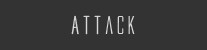
<style>
.page{position:relative;width:207px;height:50px;background:#333333}
.page>*{position:absolute;margin:0}
.t1{font:24px "AlienLeague";color:#dbdada}
</style>
<div class="page">
<p class="t1" style="left:71px;top:15px;width:64px;height:20px">Attack</p>
</div>
